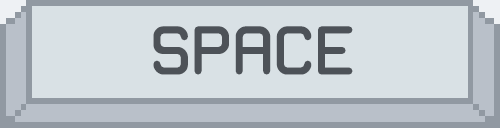
<style>
.page{position:relative;width:500px;height:128px;background:#d9e1e5}
.page>*{position:absolute;margin:0}
.t1{font:72px "WhiteRabbit";color:#4d5258}
</style>
<div class="page">
<p class="t1" style="left:153px;top:26px;width:200px;height:49px">SPACE</p>
</div>
